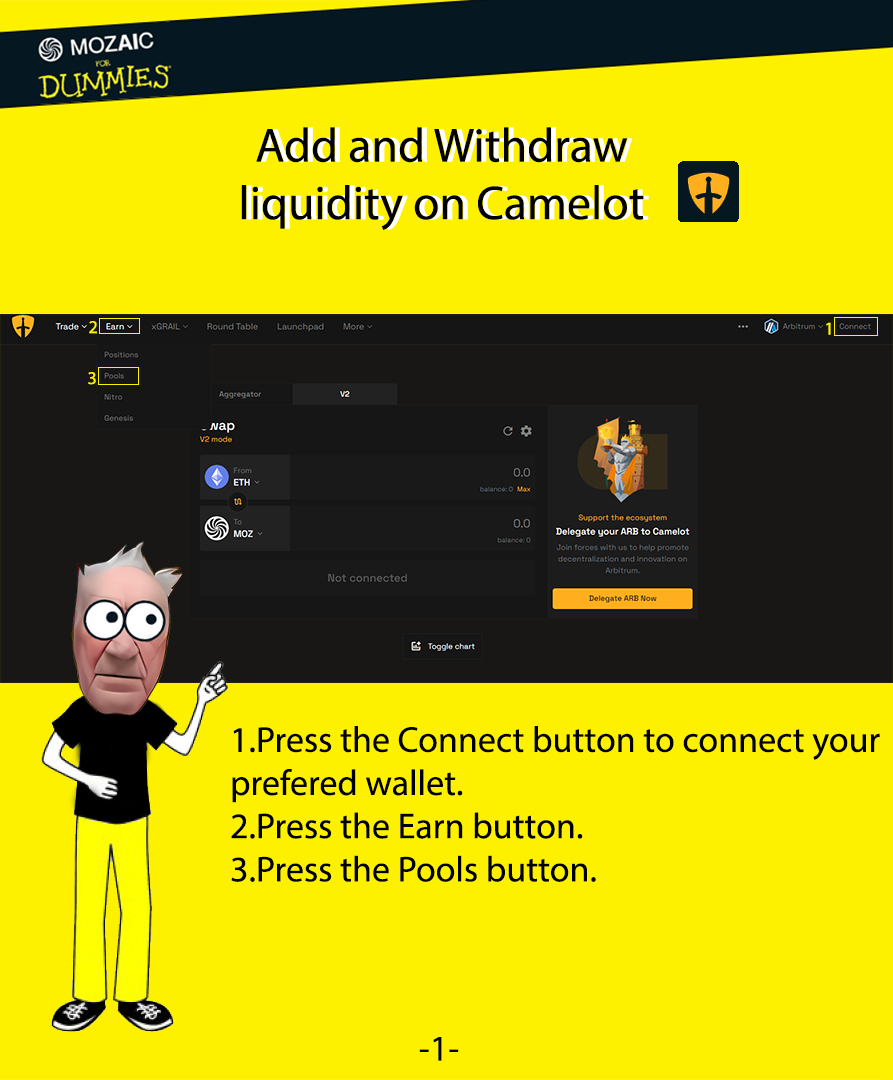
<style>
.page{position:relative;width:893px;height:1080px;background:#fdf100}
.page>*{position:absolute;margin:0}
.t1{font:48px "MyriadPro-Regular";color:#000000}
.t2{font:48px "MyriadPro-Regular";color:#ffffff}
.t3{font:18px "MyriadPro-Regular";color:#fdf100}
.t4{font:36px "MyriadPro-Regular";color:#000000}
.t5{font:36px "MyriadPro-Regular";color:#fdf100}
</style>
<div class="page">
<p class="t1" style="left:241px;top:127px;width:403px;height:103px;text-align:center">Add and Withdraw <br>liquidity on Camelot</p>
<p class="t2" style="left:246px;top:127px;width:403px;height:103px;text-align:center">Add and Withdraw <br>liquidity on Camelot</p>
<p class="t3" style="left:89px;top:321px;width:8px;height:13px">2</p>
<p class="t3" style="left:826px;top:322px;width:5px;height:13px">1</p>
<p class="t3" style="left:88px;top:372px;width:8px;height:13px">3</p>
<p class="t4" style="left:231px;top:726px;width:649px;height:156px"><span class="t5"><br></span>1.Press the Connect button to connect your prefered wallet.<br>2.Press the Earn button.<br>3.Press the Pools button.</p>
<p class="t4" style="left:419px;top:1037px;width:40px;height:24px">-1-</p>
</div>
